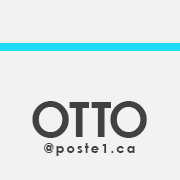
<style>
.page{position:relative;width:180px;height:180px;background:#f2f2f2}
.page>*{position:absolute;margin:0}
.t1{font:13.4px/15.7px "CenturyGothic-Bold";letter-spacing:0.14em;color:#414141}
.t2{font:49.2px/15.7px "CenturyGothic-Bold";letter-spacing:0.14em;color:#414141}
</style>
<div class="page">
<p class="t1" style="left:32px;top:101px;width:115px;height:55px;text-align:center"><span class="t2">OTTO<br></span>@poste1.ca</p>
</div>
